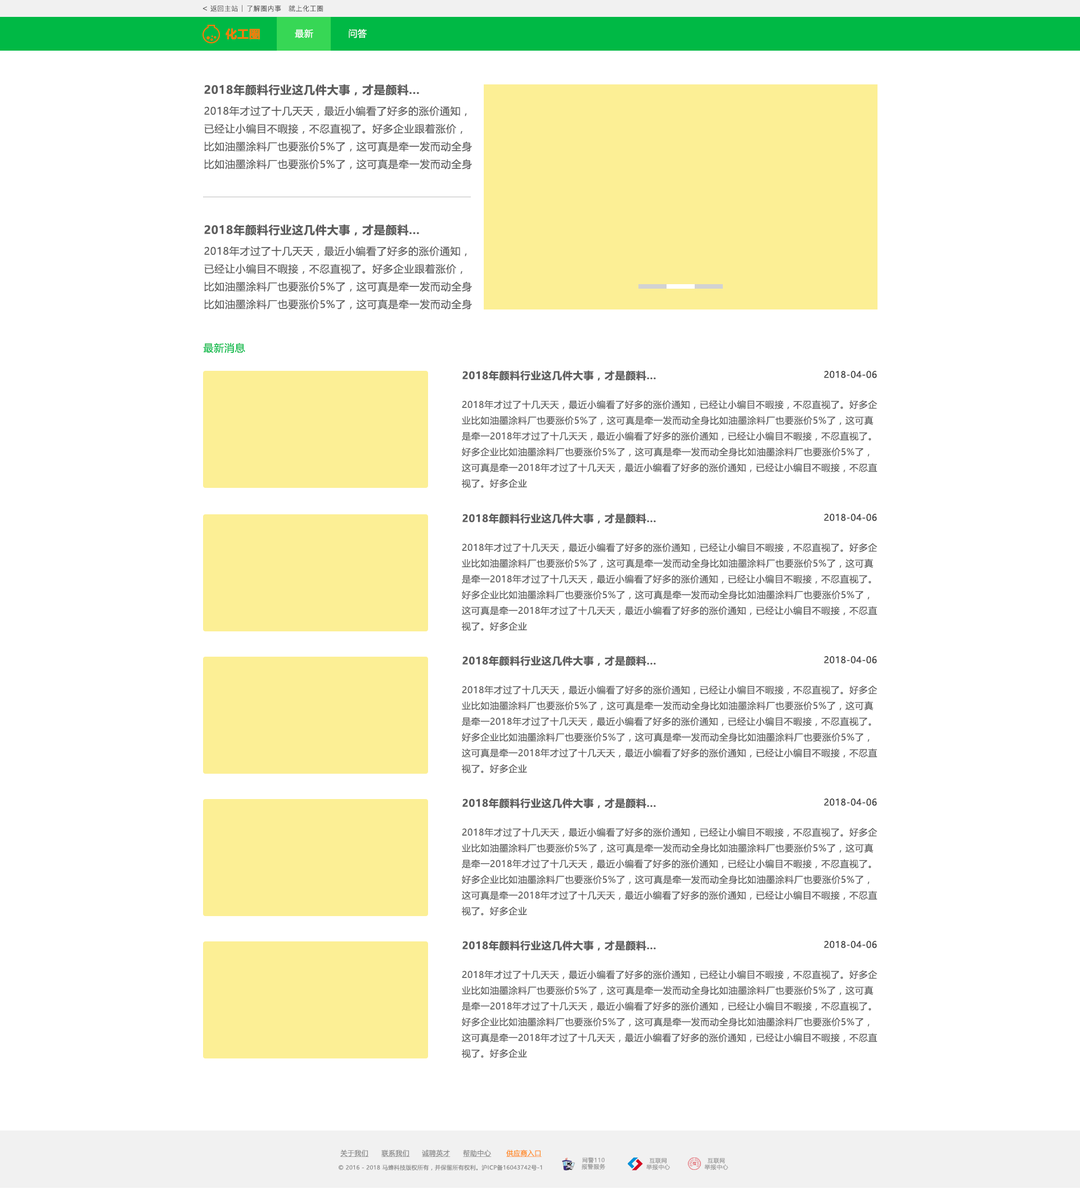
<style>
.page{position:relative;width:1080px;height:1189px;background:#ffffff}
.page>*{position:absolute;margin:0}
.t1{font:6.8px "PingFang-SC-Regular";letter-spacing:0.04em;color:#444444}
.t2{font:7.9px "PingFang-SC-Regular";letter-spacing:0.04em;color:#444444}
.t3{font:11.2px "MicrosoftYaHei-Bold";letter-spacing:0.04em;color:#f97a08}
.t4{font:9px "MicrosoftYaHei";letter-spacing:0.04em;color:#ffffff}
.t5{font:11.2px "MicrosoftYaHei-Bold";letter-spacing:0.04em;color:#5d5d5d}
.t6{font:10.1px "MicrosoftYaHei";letter-spacing:0.04em;color:#5d5d5d}
.t7{font:10.1px "MicrosoftYaHei";letter-spacing:0.04em;color:#00b945}
.t8{font:10.1px "MicrosoftYaHei-Bold";letter-spacing:0.04em;color:#5d5d5d}
.t9{font:9px "MicrosoftYaHei";letter-spacing:0.04em;color:#3a3a3a}
.t10{font:9px "MicrosoftYaHei";letter-spacing:0.04em;color:#5d5d5d}
.t11{font:6.8px "MicrosoftYaHeiUI";letter-spacing:0.04em;color:#8c8c8c;text-decoration:underline}
.t12{font:6.8px "MicrosoftYaHeiUI";letter-spacing:0.04em;color:#ff8b25;text-decoration:underline}
.t13{font:5.6px/6.5px "MicrosoftYaHei";letter-spacing:0.06em;color:#999999}
.t14{font:5.6px "MicrosoftYaHeiUI";letter-spacing:0.04em;color:#8c8c8c}
</style>
<div class="page">
<p class="t1" style="left:210px;top:5px;width:28px;height:7px">返回主站</p>
<p class="t1" style="left:247px;top:5px;width:76px;height:7px">了解圈内事　就上化工圈</p>
<p class="t2" style="left:202px;top:6px;width:5px;height:5px">&lt;</p>
<p class="t3" style="left:226px;top:28px;width:34px;height:11px">化工圈</p>
<p class="t4" style="left:295px;top:29px;width:18px;height:9px">最新</p>
<p class="t4" style="left:349px;top:29px;width:18px;height:9px">问答</p>
<p class="t5" style="left:204px;top:84px;width:215px;height:12px">2018年颜料行业这几件大事，才是颜料...</p>
<p class="t6" style="left:204px;top:106px;width:268px;height:63px">2018年才过了十几天天，最近小编看了好多的涨价通知，<br>已经让小编目不暇接，不忍直视了。好多企业跟着涨价，<br>比如油墨涂料厂也要涨价5%了，这可真是牵一发而动全身<br>比如油墨涂料厂也要涨价5%了，这可真是牵一发而动全身</p>
<p class="t5" style="left:204px;top:224px;width:215px;height:12px">2018年颜料行业这几件大事，才是颜料...</p>
<p class="t6" style="left:204px;top:246px;width:268px;height:63px">2018年才过了十几天天，最近小编看了好多的涨价通知，<br>已经让小编目不暇接，不忍直视了。好多企业跟着涨价，<br>比如油墨涂料厂也要涨价5%了，这可真是牵一发而动全身<br>比如油墨涂料厂也要涨价5%了，这可真是牵一发而动全身</p>
<p class="t7" style="left:203px;top:343px;width:42px;height:10px">最新消息</p>
<p class="t8" style="left:462px;top:370px;width:194px;height:11px">2018年颜料行业这几件大事，才是颜料...</p>
<p class="t9" style="left:824px;top:371px;width:53px;height:7px">2018-04-06</p>
<p class="t10" style="left:462px;top:400px;width:416px;height:88px">2018年才过了十几天天，最近小编看了好多的涨价通知，已经让小编目不暇接，不忍直视了。好多企业比如油墨涂料厂也要涨价5%了，这可真是牵一发而动全身比如油墨涂料厂也要涨价5%了，这可真是牵一2018年才过了十几天天，最近小编看了好多的涨价通知，已经让小编目不暇接，不忍直视了。好多企业比如油墨涂料厂也要涨价5%了，这可真是牵一发而动全身比如油墨涂料厂也要涨价5%了，这可真是牵一2018年才过了十几天天，最近小编看了好多的涨价通知，已经让小编目不暇接，不忍直视了。好多企业<br>比如油墨涂料厂也要涨价5%了，这可真是牵一发而动全身比如油墨涂料厂也要涨价5%了，这可真是牵一</p>
<p class="t8" style="left:462px;top:513px;width:194px;height:11px">2018年颜料行业这几件大事，才是颜料...</p>
<p class="t9" style="left:824px;top:514px;width:53px;height:7px">2018-04-06</p>
<p class="t10" style="left:462px;top:543px;width:416px;height:88px">2018年才过了十几天天，最近小编看了好多的涨价通知，已经让小编目不暇接，不忍直视了。好多企业比如油墨涂料厂也要涨价5%了，这可真是牵一发而动全身比如油墨涂料厂也要涨价5%了，这可真是牵一2018年才过了十几天天，最近小编看了好多的涨价通知，已经让小编目不暇接，不忍直视了。好多企业比如油墨涂料厂也要涨价5%了，这可真是牵一发而动全身比如油墨涂料厂也要涨价5%了，这可真是牵一2018年才过了十几天天，最近小编看了好多的涨价通知，已经让小编目不暇接，不忍直视了。好多企业<br>比如油墨涂料厂也要涨价5%了，这可真是牵一发而动全身比如油墨涂料厂也要涨价5%了，这可真是牵一</p>
<p class="t8" style="left:462px;top:655px;width:194px;height:11px">2018年颜料行业这几件大事，才是颜料...</p>
<p class="t9" style="left:824px;top:656px;width:53px;height:7px">2018-04-06</p>
<p class="t10" style="left:462px;top:685px;width:416px;height:88px">2018年才过了十几天天，最近小编看了好多的涨价通知，已经让小编目不暇接，不忍直视了。好多企业比如油墨涂料厂也要涨价5%了，这可真是牵一发而动全身比如油墨涂料厂也要涨价5%了，这可真是牵一2018年才过了十几天天，最近小编看了好多的涨价通知，已经让小编目不暇接，不忍直视了。好多企业比如油墨涂料厂也要涨价5%了，这可真是牵一发而动全身比如油墨涂料厂也要涨价5%了，这可真是牵一2018年才过了十几天天，最近小编看了好多的涨价通知，已经让小编目不暇接，不忍直视了。好多企业<br>比如油墨涂料厂也要涨价5%了，这可真是牵一发而动全身比如油墨涂料厂也要涨价5%了，这可真是牵一</p>
<p class="t8" style="left:462px;top:798px;width:194px;height:10px">2018年颜料行业这几件大事，才是颜料...</p>
<p class="t9" style="left:824px;top:798px;width:53px;height:8px">2018-04-06</p>
<p class="t10" style="left:462px;top:827px;width:416px;height:89px">2018年才过了十几天天，最近小编看了好多的涨价通知，已经让小编目不暇接，不忍直视了。好多企业比如油墨涂料厂也要涨价5%了，这可真是牵一发而动全身比如油墨涂料厂也要涨价5%了，这可真是牵一2018年才过了十几天天，最近小编看了好多的涨价通知，已经让小编目不暇接，不忍直视了。好多企业比如油墨涂料厂也要涨价5%了，这可真是牵一发而动全身比如油墨涂料厂也要涨价5%了，这可真是牵一2018年才过了十几天天，最近小编看了好多的涨价通知，已经让小编目不暇接，不忍直视了。好多企业<br>比如油墨涂料厂也要涨价5%了，这可真是牵一发而动全身比如油墨涂料厂也要涨价5%了，这可真是牵一</p>
<p class="t8" style="left:462px;top:940px;width:194px;height:11px">2018年颜料行业这几件大事，才是颜料...</p>
<p class="t9" style="left:824px;top:940px;width:53px;height:8px">2018-04-06</p>
<p class="t10" style="left:462px;top:970px;width:416px;height:88px">2018年才过了十几天天，最近小编看了好多的涨价通知，已经让小编目不暇接，不忍直视了。好多企业比如油墨涂料厂也要涨价5%了，这可真是牵一发而动全身比如油墨涂料厂也要涨价5%了，这可真是牵一2018年才过了十几天天，最近小编看了好多的涨价通知，已经让小编目不暇接，不忍直视了。好多企业比如油墨涂料厂也要涨价5%了，这可真是牵一发而动全身比如油墨涂料厂也要涨价5%了，这可真是牵一2018年才过了十几天天，最近小编看了好多的涨价通知，已经让小编目不暇接，不忍直视了。好多企业<br>比如油墨涂料厂也要涨价5%了，这可真是牵一发而动全身比如油墨涂料厂也要涨价5%了，这可真是牵一</p>
<p class="t11" style="left:340px;top:1149px;width:29px;height:7px">关于我们</p>
<p class="t11" style="left:381px;top:1149px;width:29px;height:7px">联系我们</p>
<p class="t11" style="left:422px;top:1149px;width:29px;height:7px">诚聘英才</p>
<p class="t11" style="left:463px;top:1149px;width:29px;height:7px">帮助中心</p>
<p class="t12" style="left:506px;top:1149px;width:36px;height:7px">供应商入口</p>
<p class="t13" style="left:582px;top:1156px;width:23px;height:13px;text-align:center">网警110<br>报警服务</p>
<p class="t13" style="left:646px;top:1157px;width:24px;height:12px;text-align:center">互联网<br>举报中心</p>
<p class="t13" style="left:704px;top:1157px;width:24px;height:12px;text-align:center">互联网<br>举报中心</p>
<p class="t14" style="left:339px;top:1164px;width:203px;height:6px">© 2016 - 2018 马蜂科技版权所有，并保留所有权利。沪ICP备16043742号-1</p>
</div>
